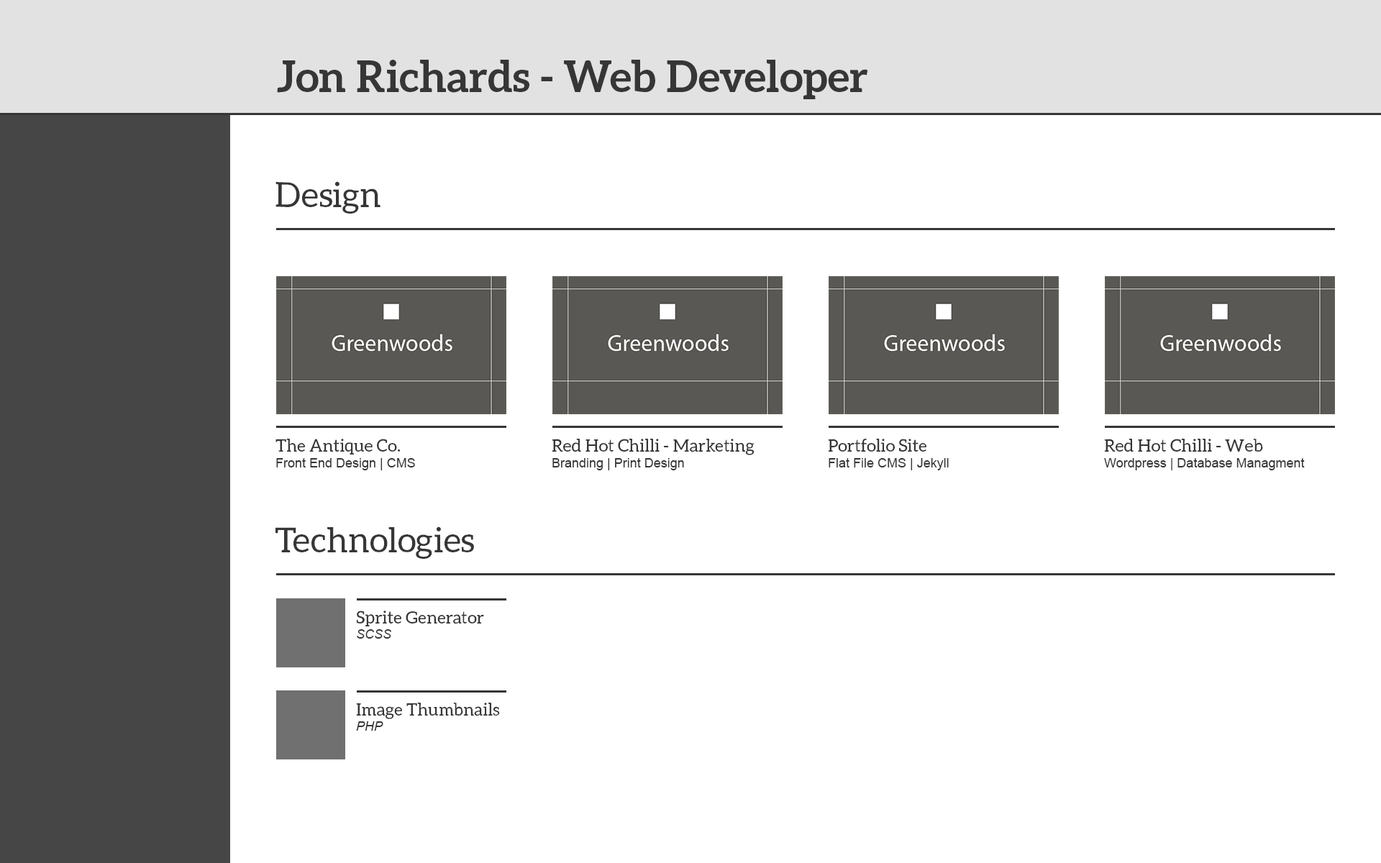
<style>
.page{position:relative;width:1381px;height:863px;background:#ffffff}
.page>*{position:absolute;margin:0}
.t1{font:43.2px "Aleo-Bold";color:#363636}
.t2{font:34.5px "Aleo-Regular";color:#363636}
.t3{font:12.9px "ArialMT";color:#363636}
.t4{font:17.3px "Aleo-Regular";color:#363636}
.t5{font:12.9px "Arial-ItalicMT";color:#363636}
</style>
<div class="page">
<p class="t1" style="left:277px;top:60px;width:591px;height:39px">Jon Richards - Web Developer</p>
<p class="t2" style="left:276px;top:181px;width:105px;height:33px">Design</p>
<p class="t3" style="left:276px;top:439px;width:139px;height:31px"><span class="t4">The Antique Co.<br></span>Front End Design | CMS</p>
<p class="t4" style="left:552px;top:439px;width:203px;height:31px">Red Hot Chilli - Marketing<br><span class="t3">Branding | Print Design</span></p>
<p class="t3" style="left:828px;top:439px;width:121px;height:31px"><span class="t4">Portfolio Site<br></span>Flat File CMS | Jekyll</p>
<p class="t3" style="left:1104px;top:439px;width:201px;height:31px"><span class="t4">Red Hot Chilli - Web<br></span>Wordpress | Database Managment</p>
<p class="t2" style="left:276px;top:527px;width:198px;height:32px">Technologies</p>
<p class="t4" style="left:356px;top:611px;width:128px;height:28px">Sprite Generator<br><span class="t5">SCSS</span></p>
<p class="t4" style="left:356px;top:703px;width:144px;height:28px">Image Thumbnails<br><span class="t5">PHP</span></p>
</div>
